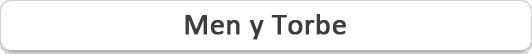
<style>
.page{position:relative;width:532px;height:54px;background:#ffffff}
.page>*{position:absolute;margin:0}
.t1{font:30px "Calibri";color:#3d3d3d;font-weight:bold}
</style>
<div class="page">
<p class="t1" style="left:185px;top:14px;width:161px;height:26px">Men y Torbe</p>
</div>
